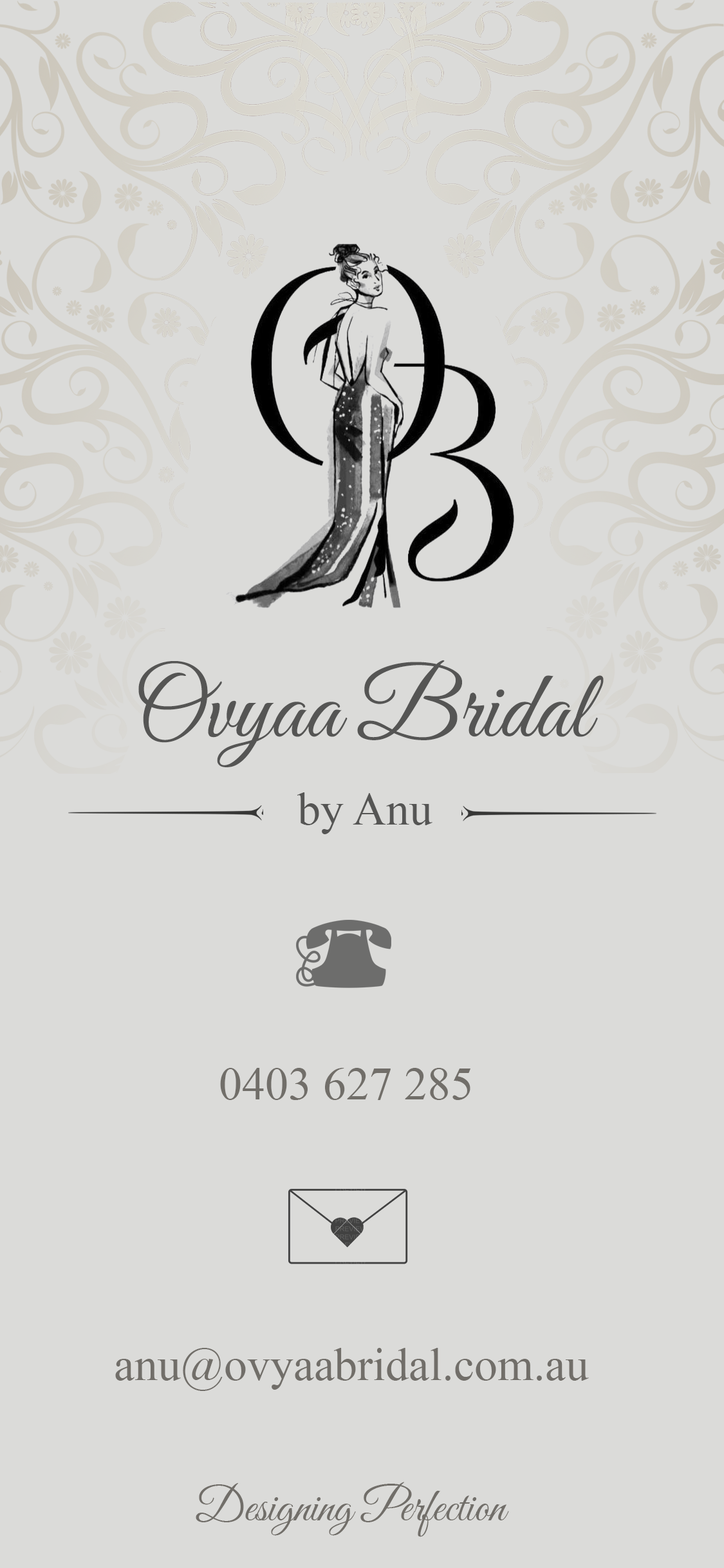
<style>
.page{position:relative;width:724px;height:1568px;background:#dbdbd9}
.page>*{position:absolute;margin:0}
.t1{font:96.6px "GreatVibes-Regular";color:#555554}
.t2{font:46.3px "TimesNewRomanPSMT";color:#555554}
.t3{font:46.3px "TimesNewRomanPSMT";color:#716e69}
.t4{font:46.3px "GreatVibes-Regular";color:#716e69}
</style>
<div class="page">
<p class="t1" style="left:138px;top:660px;width:466px;height:107px">Ovyaa Bridal</p>
<p class="t2" style="left:297px;top:792px;width:136px;height:42px">by Anu</p>
<p class="t3" style="left:220px;top:1068px;width:251px;height:32px">0403 627 285</p>
<p class="t3" style="left:115px;top:1348px;width:474px;height:43px">anu@ovyaabridal.com.au</p>
<p class="t4" style="left:196px;top:1482px;width:313px;height:55px">Designing Perfection</p>
</div>
